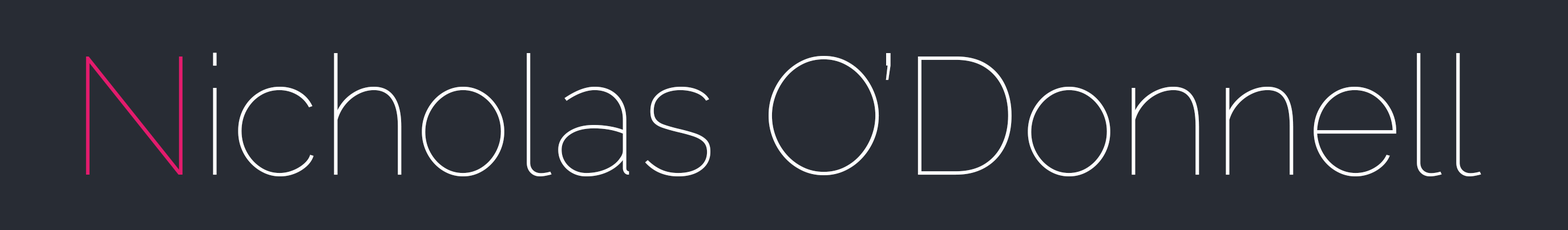
<style>
.page{position:relative;width:1568px;height:230px;background:#282c34}
.page>*{position:absolute;margin:0}
.t1{font:166.6px "Raleway-Thin";color:#ffffff}
.t2{font:166.6px "Raleway-Thin";color:#e31b6d}
</style>
<div class="page">
<p class="t1" style="left:86px;top:52px;width:1395px;height:124px"><span class="t2">N</span>icholas O’Donnell</p>
</div>
